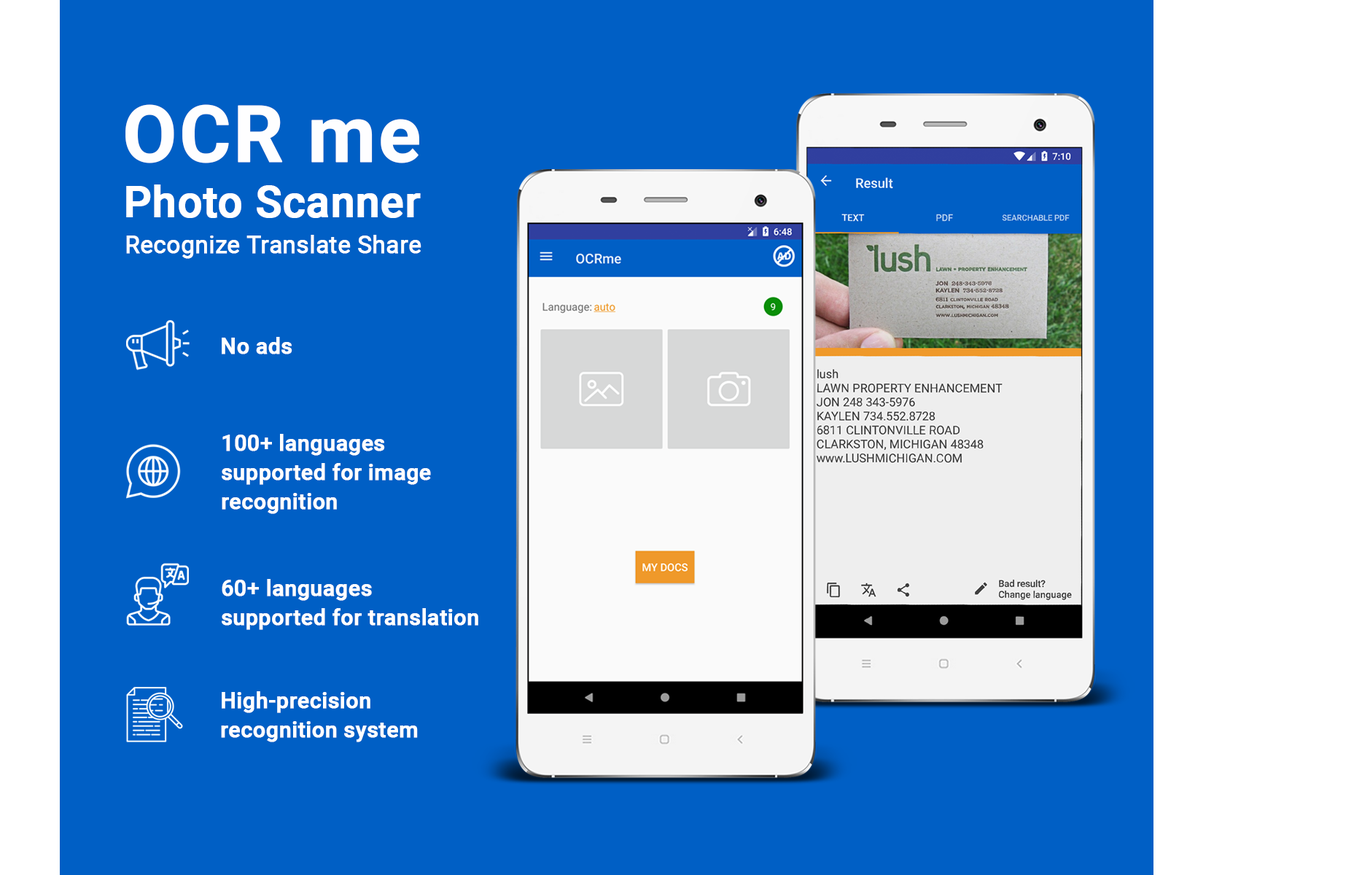
<style>
.page{position:relative;width:1362px;height:875px;background:#005fc5}
.page>*{position:absolute;margin:0}
.t1{font:79.1px "Roboto-Bold";color:#fefeff;text-transform:uppercase;font-weight:bold}
.t2{font:79.1px "Roboto-Bold";color:#fefeff;font-weight:bold}
.t3{font:43px "Roboto-Medium";color:#ffffff;font-weight:bold}
.t4{font:23.9px "Roboto-Regular";color:#ffffff;font-weight:bold}
.t5{font:21.9px "Roboto-Medium";color:#ffffff;font-weight:bold}
.t6{font:21.8px/29.1px "Roboto-Medium";color:#ffffff;font-weight:bold}
.t7{font:21.9px/29.2px "Roboto-Medium";color:#ffffff;font-weight:bold}
</style>
<div class="page">
<p class="t1" style="left:125px;top:104px;width:294px;height:59px">OCR <span class="t2">me</span></p>
<p class="t3" style="left:126px;top:185px;width:295px;height:33px">Photo Scanner</p>
<p class="t4" style="left:126px;top:235px;width:296px;height:24px">Recognize Translate Share</p>
<p class="t5" style="left:222px;top:337px;width:70px;height:17px">No ads</p>
<p class="t6" style="left:222px;top:434px;width:209px;height:80px">100+ languages <br>supported for image<br>recognition</p>
<p class="t7" style="left:222px;top:579px;width:256px;height:51px">60+ languages <br>supported for translation</p>
<p class="t7" style="left:221px;top:691px;width:197px;height:51px">High-precision <br>recognition system</p>
</div>
